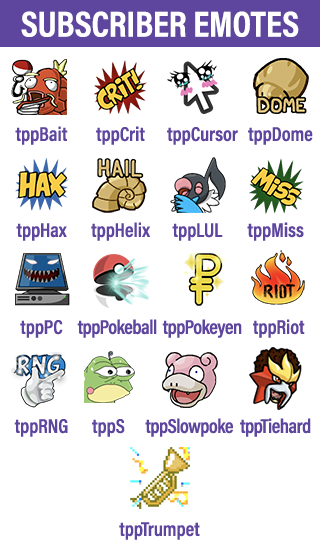
<style>
.page{position:relative;width:320px;height:550px;background:#ffffff}
.page>*{position:absolute;margin:0}
.t1{font:36.3px "AcuminProCond-Bold";color:#ffffff;text-transform:uppercase}
.t2{font:20px "AcuminProCond-Semibold";color:#5e469f}
.t3{font:20px "AcuminProCond-Semibold";letter-spacing:-0.025em;color:#5e469f}
</style>
<div class="page">
<p class="t1" style="left:21px;top:11px;width:278px;height:26px">Subscriber emotes</p>
<p class="t2" style="left:15px;top:126px;width:53px;height:19px">tppBait</p>
<p class="t2" style="left:96px;top:126px;width:49px;height:19px">tppCrit</p>
<p class="t2" style="left:167px;top:127px;width:71px;height:18px">tppCursor</p>
<p class="t2" style="left:248px;top:127px;width:65px;height:18px">tppDome</p>
<p class="t2" style="left:91px;top:222px;width:59px;height:19px">tppHelix</p>
<p class="t2" style="left:247px;top:222px;width:57px;height:19px">tppMiss</p>
<p class="t2" style="left:16px;top:223px;width:51px;height:18px">tppHax</p>
<p class="t2" style="left:172px;top:223px;width:51px;height:18px">tppLUL</p>
<p class="t2" style="left:20px;top:320px;width:43px;height:18px">tppPC</p>
<p class="t3" style="left:77px;top:319px;width:80px;height:19px">tppPokeball</p>
<p class="t3" style="left:162px;top:319px;width:80px;height:19px">tppPokeyen</p>
<p class="t2" style="left:253px;top:319px;width:52px;height:19px">tppRiot</p>
<p class="t2" style="left:14px;top:419px;width:54px;height:18px">tppRNG</p>
<p class="t2" style="left:92px;top:419px;width:33px;height:18px">tppS</p>
<p class="t3" style="left:145px;top:418px;width:88px;height:19px">tppSlowpoke</p>
<p class="t3" style="left:240px;top:418px;width:71px;height:19px">tppTiehard</p>
<p class="t2" style="left:119px;top:522px;width:81px;height:18px">tppTrumpet</p>
</div>
